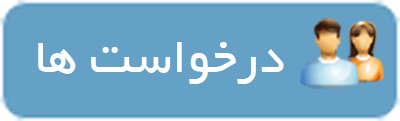
<style>
.page{position:relative;width:400px;height:121px;background:#65a1c6}
.page>*{position:absolute;margin:0}
.t1{font:53.3px "BYekan";color:#ffffff}
</style>
<div class="page">
<p class="t1" style="left:38px;top:42px;width:246px;height:42px">درخواست ها</p>
</div>
